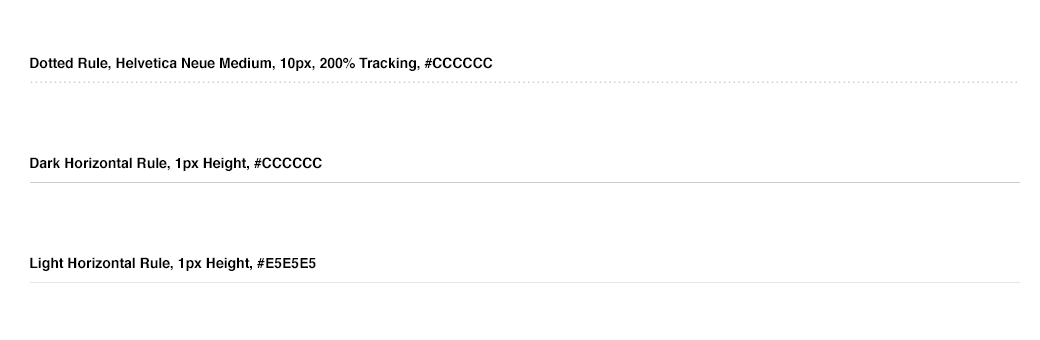
<style>
.page{position:relative;width:1040px;height:340px;background:#ffffff}
.page>*{position:absolute;margin:0}
.t1{font:14px "Helvetica-Bold";color:#000000}
.t2{font:10px "HelveticaNeue-Medium";letter-spacing:0.2em;color:#cccccc}
</style>
<div class="page">
<p class="t1" style="left:30px;top:57px;width:463px;height:14px">Dotted Rule, Helvetica Neue Medium, 10px, 200% Tracking, #CCCCCC</p>
<p class="t2" style="left:30px;top:81px;width:987px;height:2px">...............................................................................................................................................................................................................</p>
<p class="t1" style="left:30px;top:157px;width:292px;height:14px">Dark Horizontal Rule, 1px Height, #CCCCCC</p>
<p class="t1" style="left:30px;top:257px;width:286px;height:14px">Light Horizontal Rule, 1px Height, #E5E5E5</p>
</div>
